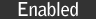
<style>
.page{position:relative;width:96px;height:19px;background:#333333}
.page>*{position:absolute;margin:0}
.t1{font:19px "BellGothicStd-Bold";letter-spacing:-0.025em;color:#ffffff}
</style>
<div class="page">
<p class="t1" style="left:18px;top:1px;width:60px;height:16px">Enabled</p>
</div>
